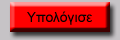
<style>
.page{position:relative;width:120px;height:40px;background:#ff0000}
.page>*{position:absolute;margin:0}
.t1{font:14px "ArialMT";color:#000000}
</style>
<div class="page">
<p class="t1" style="left:27px;top:11px;width:65px;height:14px">Υπολόγισε</p>
</div>
